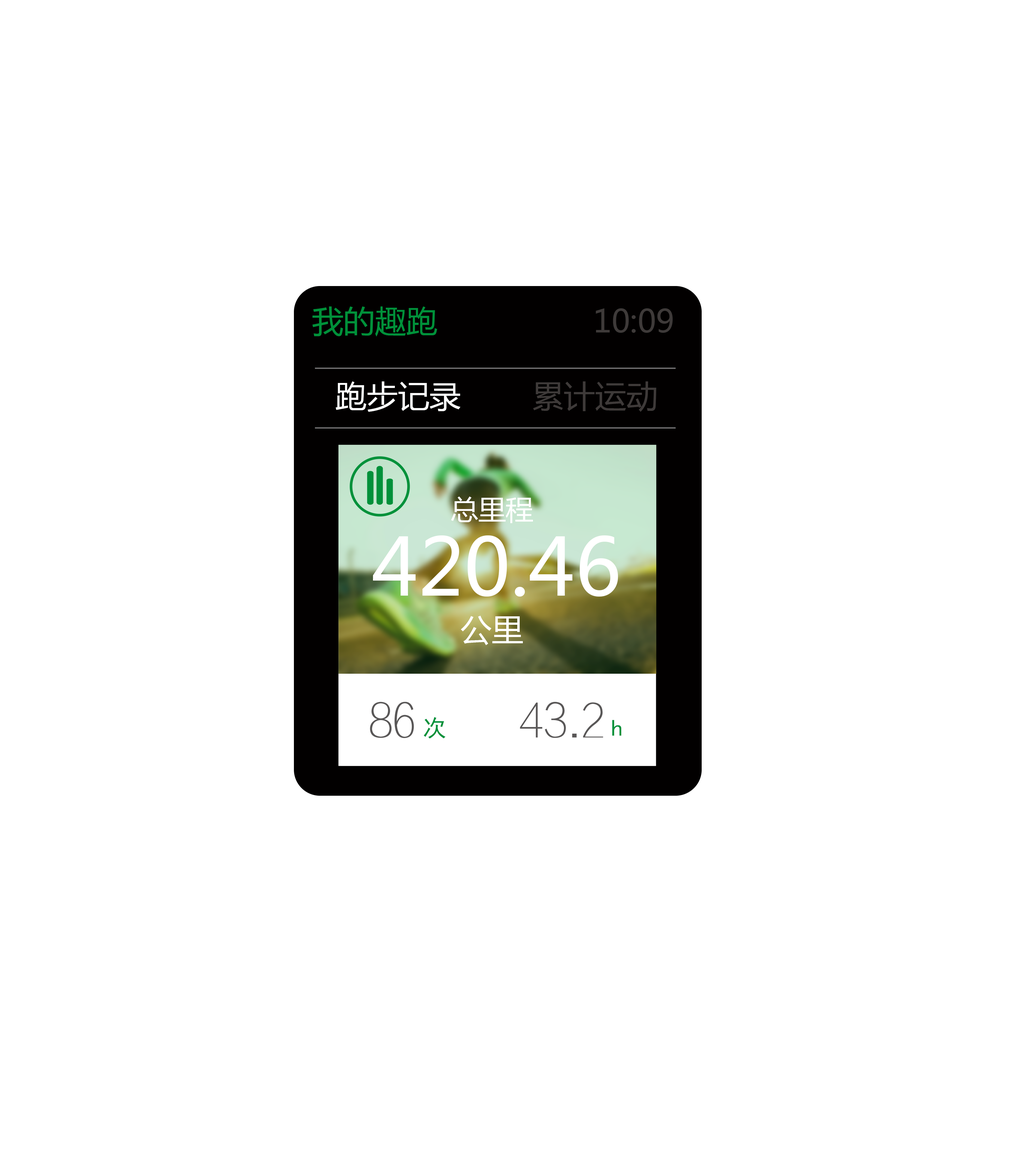
<style>
.page{position:relative;width:1026px;height:1163px;background:#ffffff}
.page>*{position:absolute;margin:0}
.t1{font:31.4px "MicrosoftYaHei";color:#00913a}
.t2{font:31.4px "MicrosoftYaHei";color:#3e3a39}
.t3{font:31.4px "MicrosoftYaHei";color:#ffffff}
.t4{font:27.4px "MicrosoftYaHei";color:#ffffff}
.t5{font:78.4px "MicrosoftYaHei";color:#ffffff}
.t6{font:47px "FZXTHJW--GB1-0";color:#595757}
.t7{font:23.5px "SimHei";color:#00913a}
</style>
<div class="page">
<p class="t1" style="left:312px;top:306px;width:125px;height:30px">我的趣跑</p>
<p class="t2" style="left:595px;top:308px;width:78px;height:25px">10:09</p>
<p class="t3" style="left:335px;top:381px;width:125px;height:31px">跑步记录</p>
<p class="t2" style="left:533px;top:381px;width:123px;height:31px">累计运动</p>
<p class="t4" style="left:451px;top:496px;width:82px;height:27px">总里程</p>
<p class="t5" style="left:373px;top:535px;width:245px;height:61px">420.46</p>
<p class="t3" style="left:461px;top:615px;width:62px;height:30px">公里</p>
<p class="t6" style="left:370px;top:701px;width:44px;height:37px">86</p>
<p class="t6" style="left:520px;top:701px;width:83px;height:37px">43.2</p>
<p class="t7" style="left:424px;top:717px;width:21px;height:21px">次</p>
<p class="t7" style="left:612px;top:720px;width:9px;height:16px">h</p>
</div>
